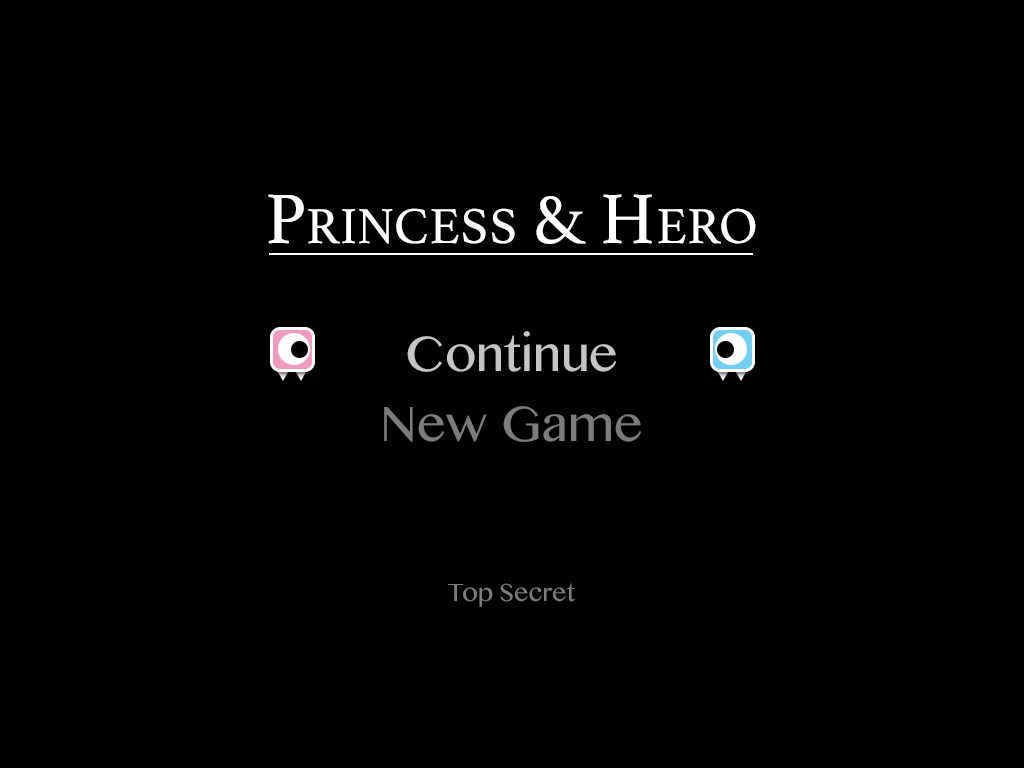
<style>
.page{position:relative;width:1024px;height:768px;background:#000000}
.page>*{position:absolute;margin:0}
.t1{font:74px "Athelas-Regular";color:#ffffff;font-variant:small-caps}
.t2{font:50px "MyanmarMN";color:#c5c5c5}
.t3{font:50px "MyanmarMN";color:#7c7c7c}
.t4{font:25px "MyanmarMN";color:#7c7c7c}
</style>
<div class="page">
<p class="t1" style="left:268px;top:194px;width:488px;height:50px">Princess &amp; Hero</p>
<p class="t2" style="left:407px;top:331px;width:209px;height:41px">Continue</p>
<p class="t3" style="left:384px;top:406px;width:257px;height:36px">New Game</p>
<p class="t4" style="left:448px;top:583px;width:127px;height:24px">Top Secret</p>
</div>
